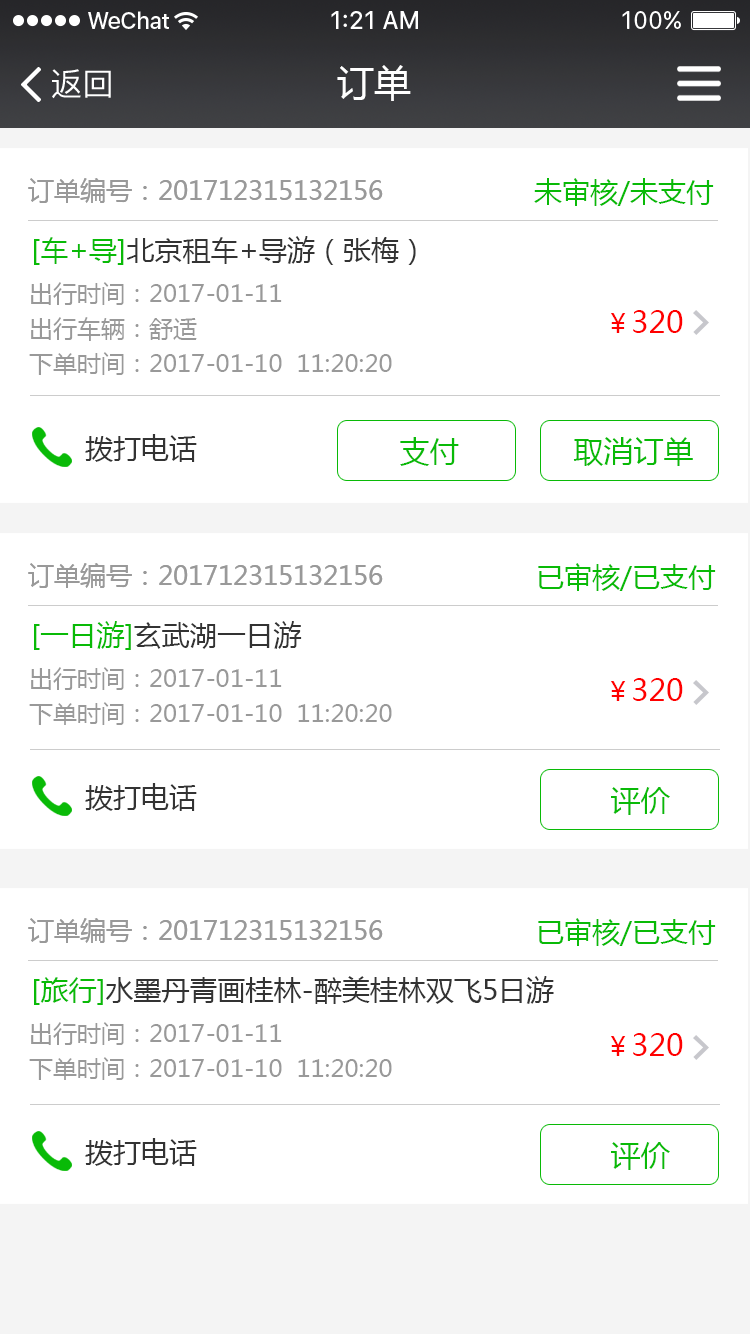
<style>
.page{position:relative;width:750px;height:1334px;background:#ffffff}
.page>*{position:absolute;margin:0}
.t1{font:37px "MicrosoftYaHei";color:#ffffff}
.t2{font:32px "PingFangSC-Regular";color:#ffffff}
.t3{font:26px "MicrosoftYaHei";color:#999999}
.t4{font:28px "MicrosoftYaHei";color:#09ba07}
.t5{font:28px "MicrosoftYaHei";color:#333333}
.t6{font:24px/39px "MicrosoftYaHei";color:#999999}
.t7{font:30px "MicrosoftYaHei";color:#ff0000}
.t8{font:26px "MicrosoftYaHei";color:#ff0000}
.t9{font:30px "MicrosoftYaHei";color:#09ba07}
</style>
<div class="page">
<p class="t1" style="left:337px;top:65px;width:74px;height:36px">订单</p>
<p class="t2" style="left:52px;top:69px;width:59px;height:30px">返回</p>
<p class="t3" style="left:28px;top:178px;width:355px;height:25px">订单编号：201712315132156</p>
<p class="t4" style="left:534px;top:178px;width:180px;height:28px">未审核/未支付</p>
<p class="t5" style="left:34px;top:236px;width:382px;height:29px"><span class="t4">[车+导]</span>北京租车+导游（张梅）</p>
<p class="t6" style="left:29px;top:282px;width:363px;height:93px">出行时间：2017-01-11<br>出行车辆：舒适<br>下单时间：2017-01-10  11:20:20</p>
<p class="t7" style="left:611px;top:310px;width:72px;height:23px"><span class="t8">￥</span>320</p>
<p class="t5" style="left:85px;top:434px;width:112px;height:28px">拨打电话</p>
<p class="t9" style="left:400px;top:437px;width:59px;height:29px">支付</p>
<p class="t9" style="left:573px;top:437px;width:120px;height:29px">取消订单</p>
<p class="t3" style="left:28px;top:563px;width:355px;height:25px">订单编号：201712315132156</p>
<p class="t4" style="left:538px;top:563px;width:178px;height:28px">已审核/已支付</p>
<p class="t5" style="left:34px;top:621px;width:268px;height:29px"><span class="t4">[一日游]</span>玄武湖一日游</p>
<p class="t6" style="left:29px;top:667px;width:363px;height:58px">出行时间：2017-01-11<br>下单时间：2017-01-10  11:20:20</p>
<p class="t7" style="left:611px;top:678px;width:72px;height:23px"><span class="t8">￥</span>320</p>
<p class="t5" style="left:85px;top:783px;width:112px;height:28px">拨打电话</p>
<p class="t9" style="left:611px;top:787px;width:59px;height:28px">评价</p>
<p class="t3" style="left:28px;top:918px;width:355px;height:25px">订单编号：201712315132156</p>
<p class="t4" style="left:538px;top:918px;width:178px;height:28px">已审核/已支付</p>
<p class="t5" style="left:34px;top:976px;width:520px;height:29px"><span class="t4">[旅行]</span>水墨丹青画桂林-醉美桂林双飞5日游</p>
<p class="t6" style="left:29px;top:1022px;width:363px;height:58px">出行时间：2017-01-11<br>下单时间：2017-01-10  11:20:20</p>
<p class="t7" style="left:611px;top:1033px;width:72px;height:23px"><span class="t8">￥</span>320</p>
<p class="t5" style="left:85px;top:1138px;width:112px;height:28px">拨打电话</p>
<p class="t9" style="left:611px;top:1142px;width:59px;height:28px">评价</p>
</div>
